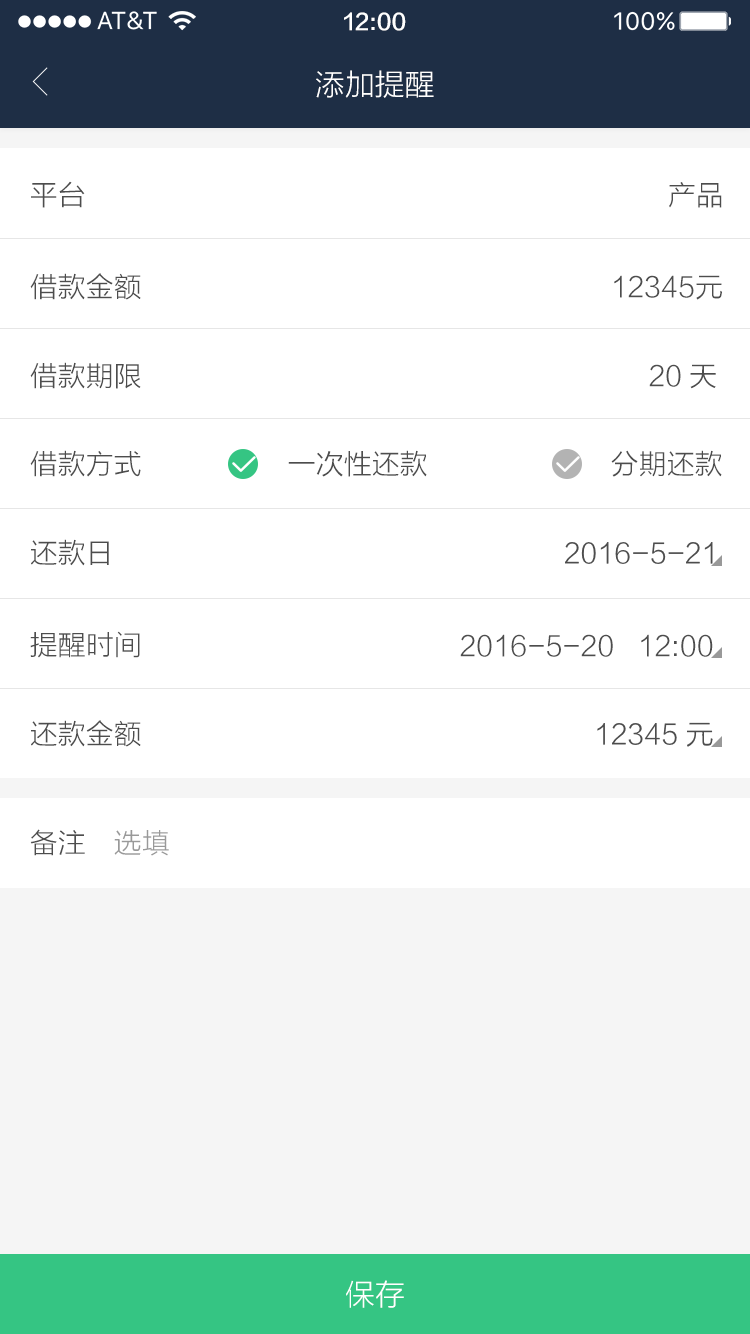
<style>
.page{position:relative;width:750px;height:1334px;background:#ffffff}
.page>*{position:absolute;margin:0}
.t1{font:22px "FZLTZHK--GBK1-0";color:#ffffff}
.t2{font:30px "FZLTXHK";color:#ffffff}
.t3{font:28px "FZLTXHK";color:#4d4d4d}
.t4{font:28px "FZLTXHK";color:#999999}
</style>
<div class="page">
<p class="t1" style="left:344px;top:12px;width:62px;height:19px">12:00</p>
<p class="t2" style="left:316px;top:70px;width:118px;height:28px">添加提醒</p>
<p class="t3" style="left:31px;top:181px;width:54px;height:27px">平台</p>
<p class="t3" style="left:669px;top:182px;width:53px;height:26px">产品</p>
<p class="t3" style="left:30px;top:273px;width:111px;height:27px">借款金额</p>
<p class="t3" style="left:614px;top:275px;width:108px;height:25px">12345元</p>
<p class="t3" style="left:30px;top:362px;width:111px;height:27px">借款期限</p>
<p class="t3" style="left:649px;top:364px;width:32px;height:23px">20</p>
<p class="t3" style="left:690px;top:364px;width:26px;height:25px">天</p>
<p class="t3" style="left:30px;top:450px;width:111px;height:27px">借款方式</p>
<p class="t3" style="left:288px;top:450px;width:139px;height:27px">一次性还款</p>
<p class="t3" style="left:611px;top:450px;width:111px;height:27px">分期还款</p>
<p class="t3" style="left:31px;top:539px;width:78px;height:27px">还款日</p>
<p class="t3" style="left:565px;top:542px;width:148px;height:22px">2016-5-21</p>
<p class="t3" style="left:30px;top:631px;width:110px;height:27px">提醒时间</p>
<p class="t3" style="left:460px;top:634px;width:253px;height:23px">2016-5-20   12:00</p>
<p class="t3" style="left:31px;top:720px;width:110px;height:27px">还款金额</p>
<p class="t3" style="left:597px;top:722px;width:116px;height:25px">12345元</p>
<p class="t3" style="left:30px;top:829px;width:55px;height:27px">备注</p>
<p class="t4" style="left:114px;top:830px;width:55px;height:26px">选填</p>
<p class="t2" style="left:346px;top:1280px;width:58px;height:28px">保存</p>
</div>
